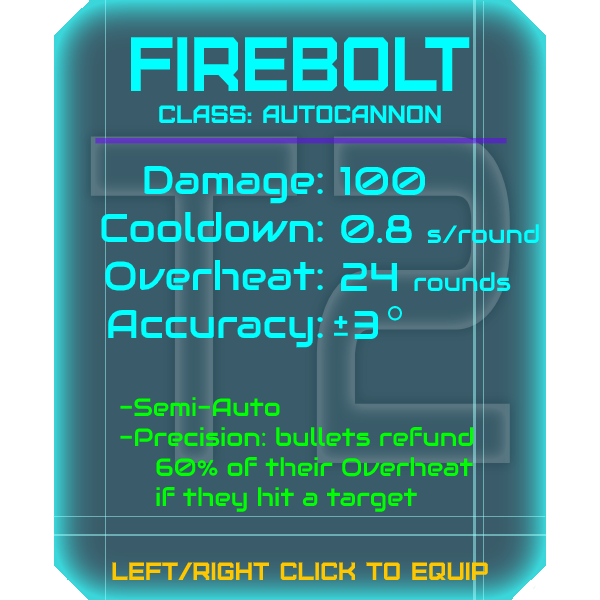
<style>
.page{position:relative;width:600px;height:600px;background:#3a5c6a}
.page>*{position:absolute;margin:0}
.t1{font:76.8px "Furore";color:#00ffff;scale:0.91 1}
.t2{font:25px "Furore";color:#00ffff}
.t3{font:40px "Audiowide-Regular";color:#00ffff}
.t4{font:25px "Audiowide-Regular";color:#00ffff}
.t5{font:25px "Audiowide-Regular";color:#00ff00}
.t6{font:25px "Furore";color:#ffc700}
</style>
<div class="page">
<p class="t1" style="left:130px;top:37px;width:340px;height:54px">Firebolt</p>
<p class="t2" style="left:159px;top:105px;width:282px;height:18px">Class: autocannon</p>
<p class="t3" style="left:101px;top:165px;width:222px;height:183px;text-align:right">Damage:<br>Cooldown:<br>Overheat:<br>Accuracy:</p>
<p class="t3" style="left:340px;top:166px;width:199px;height:173px">100<br>0.8 <span class="t4">s/round<br></span>24 <span class="t4">rounds<br> </span>3</p>
<p class="t5" style="left:120px;top:397px;width:354px;height:115px"><span class="t3"><br><br><br><br><br></span>-Semi-Auto<br>-Precision: bullets refund<br> 60% of their Overheat<br> if they hit a target</p>
<p class="t6" style="left:112px;top:562px;width:376px;height:18px">left/right click to equip</p>
</div>
